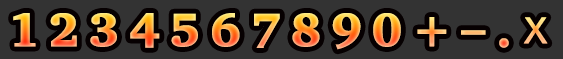
<style>
.page{position:relative;width:563px;height:59px;background:#333333}
.page>*{position:absolute;margin:0}
.t1{font:48px "Charter-Black";letter-spacing:0.17em;font-weight:bold}
.t2{font:48px "Charter-Black";letter-spacing:0.2em;font-weight:bold}
.t3{font:48px "AppleGothic";letter-spacing:0.2em;font-weight:bold}
</style>
<div class="page">
<p class="t1" style="left:13px;top:13px;width:535px;height:37px">1234567890+<span class="t2">_.</span><span class="t3">x</span></p>
</div>
